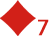
<style>
.page{position:relative;width:52px;height:36px;background:#ffffff}
.page>*{position:absolute;margin:0}
.t1{font:23.4px "MyriadPro-Regular";letter-spacing:-0.1em;color:#d22018;font-weight:bold}
</style>
<div class="page">
<p class="t1" style="left:38px;top:19px;width:11px;height:17px">7</p>
</div>
